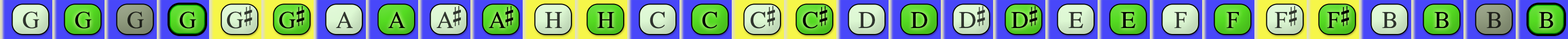
<style>
.page{position:relative;width:1568px;height:39px}
.page>*{position:absolute;margin:0}
.t1{font:24.1px "OpusChords";color:#2f352d}
.t2{font:24.1px "OpusChords";color:#000000}
.t3{font:24.1px "OpusChords";color:#1e211b}
.t4{font:24.1px "OpusChords";letter-spacing:-0.025em;color:#2f352d}
.t5{font:24.1px "OpusChords";letter-spacing:-0.025em;color:#000000}
.t6{font:24.1px "OpusChords";letter-spacing:-0.1em;color:#2f352d}
.t7{font:24.1px "OpusChords";letter-spacing:-0.1em;color:#000000}
.t8{font:24.1px "OpusChords";color:#30352d}
.t9{font:24.1px "OpusChords";color:#30362e}
.t10{font:24.1px "OpusChords";color:#1f211b}
</style>
<div class="page">
<p class="t1" style="left:23px;top:12px;width:16px;height:17px">G</p>
<p class="t2" style="left:75px;top:12px;width:16px;height:17px">G</p>
<p class="t3" style="left:127px;top:12px;width:17px;height:17px">G</p>
<p class="t2" style="left:179px;top:12px;width:17px;height:17px">G</p>
<p class="t4" style="left:227px;top:6px;width:25px;height:23px">G#</p>
<p class="t5" style="left:279px;top:6px;width:26px;height:23px">G#</p>
<p class="t1" style="left:336px;top:12px;width:17px;height:16px">A</p>
<p class="t2" style="left:388px;top:12px;width:17px;height:16px">A</p>
<p class="t6" style="left:436px;top:6px;width:25px;height:22px">A#</p>
<p class="t7" style="left:488px;top:6px;width:25px;height:22px">A#</p>
<p class="t8" style="left:545px;top:12px;width:17px;height:16px">H</p>
<p class="t2" style="left:597px;top:12px;width:17px;height:16px">H</p>
<p class="t9" style="left:650px;top:12px;width:15px;height:17px">C</p>
<p class="t2" style="left:702px;top:12px;width:15px;height:17px">C</p>
<p class="t1" style="left:750px;top:6px;width:25px;height:23px">C#</p>
<p class="t2" style="left:803px;top:6px;width:24px;height:23px">C#</p>
<p class="t1" style="left:858px;top:12px;width:17px;height:16px">D</p>
<p class="t2" style="left:911px;top:12px;width:16px;height:16px">D</p>
<p class="t4" style="left:959px;top:6px;width:26px;height:22px">D#</p>
<p class="t5" style="left:1011px;top:6px;width:26px;height:22px">D#</p>
<p class="t9" style="left:1068px;top:12px;width:15px;height:16px">E</p>
<p class="t2" style="left:1121px;top:12px;width:14px;height:16px">E</p>
<p class="t9" style="left:1174px;top:12px;width:13px;height:16px">F</p>
<p class="t2" style="left:1226px;top:12px;width:13px;height:16px">F</p>
<p class="t8" style="left:1275px;top:6px;width:22px;height:22px">F#</p>
<p class="t2" style="left:1327px;top:6px;width:22px;height:22px">F#</p>
<p class="t8" style="left:1382px;top:12px;width:15px;height:16px">B</p>
<p class="t2" style="left:1434px;top:12px;width:15px;height:16px">B</p>
<p class="t10" style="left:1487px;top:12px;width:14px;height:16px">B</p>
<p class="t2" style="left:1539px;top:12px;width:14px;height:16px">B</p>
</div>
